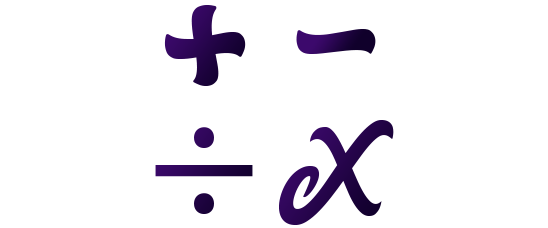
<style>
.page{position:relative;width:548px;height:228px;background:#ffffff}
.page>*{position:absolute;margin:0}
.t1{font:203.3px "MarttabuckDEMO";letter-spacing:0.01em;color:#26044b;text-transform:uppercase}
.t2{font:198.7px "MarttabuckDEMO";letter-spacing:0.01em;text-transform:uppercase}
.t3{font:104px "MarttabuckDEMO";letter-spacing:0.01em;color:#26044b;text-transform:uppercase}
.t4{font:187.7px "MyriadPro-Regular";letter-spacing:0.01em;color:#26054c;text-transform:uppercase}
</style>
<div class="page">
<p class="t1" style="left:164px;top:5px;width:82px;height:81px">+</p>
<p class="t2" style="left:296px;top:29px;width:80px;height:25px">-</p>
<p class="t3" style="left:279px;top:120px;width:115px;height:105px">x</p>
<p class="t4" style="left:155px;top:127px;width:98px;height:87px">÷</p>
</div>
